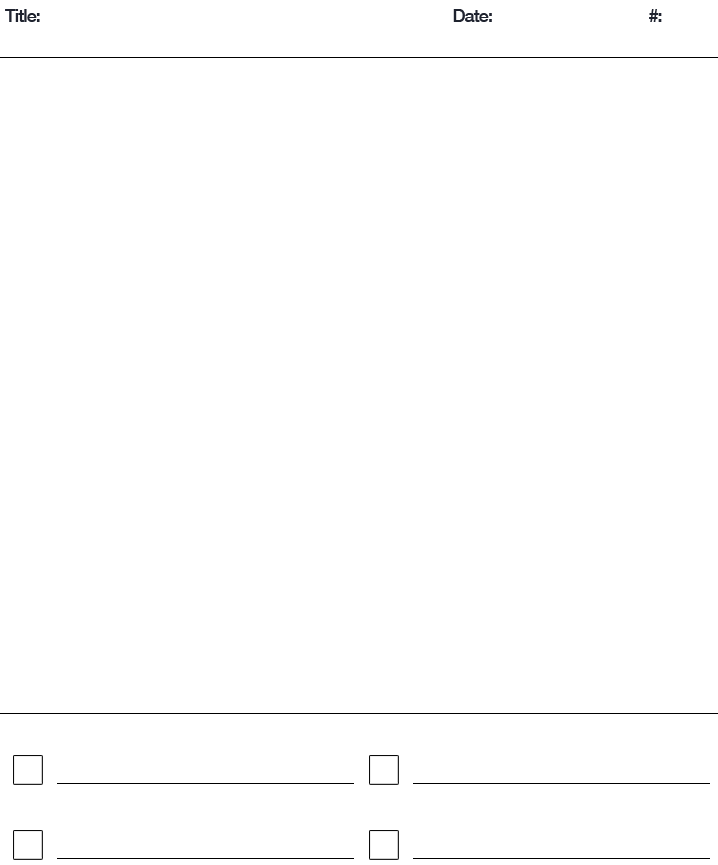
<style>
.page{position:relative;width:718px;height:865px;background:#ffffff}
.page>*{position:absolute;margin:0}
.t1{font:18px "HelveticaNeue-Medium";letter-spacing:-0.05em;color:#1f232f}
</style>
<div class="page">
<p class="t1" style="left:5px;top:9px;width:35px;height:13px">Title:</p>
<p class="t1" style="left:453px;top:9px;width:39px;height:13px">Date:</p>
<p class="t1" style="left:649px;top:9px;width:13px;height:13px">#:</p>
</div>
